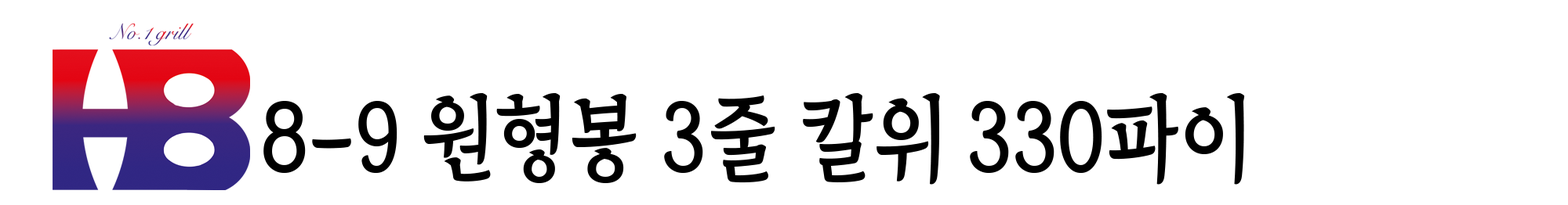
<style>
.page{position:relative;width:1568px;height:205px;background:#ffffff}
.page>*{position:absolute;margin:0}
.t1{font:93.7px "TheIndependenceHallofKorea-Regular";color:#000000;scale:0.89 1}
</style>
<div class="page">
<p class="t1" style="left:263px;top:93px;width:982px;height:92px">8-9 원형봉 3줄 칼위 330파이</p>
</div>
